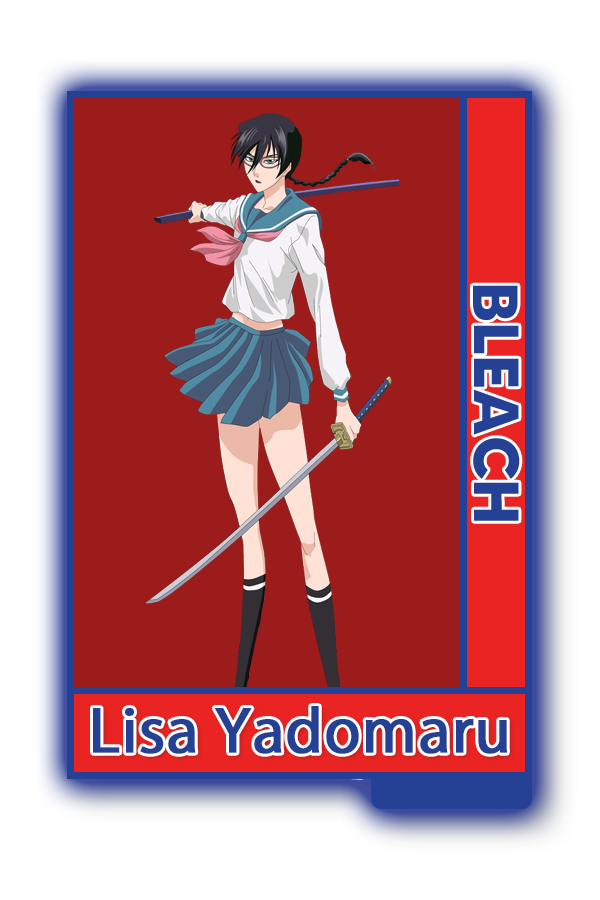
<style>
.page{position:relative;width:600px;height:900px;background:#9c1c1b}
.page>*{position:absolute;margin:0}
.t1{font:63.6px "MADETOMMY-Bold";color:#254195}
.t2{font:65.4px "MyriadPro-Regular";color:#254195;font-weight:bold}
</style>
<div class="page">
<p class="t1" style="left:473px;top:285px;width:47px;height:236px;rotate:90deg">BLEACH</p>
<p class="t2" style="left:93px;top:706px;width:414px;height:48px">Lisa Yadomaru</p>
</div>
